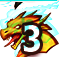
<style>
.page{position:relative;width:59px;height:57px;background:#ffffff}
.page>*{position:absolute;margin:0}
.t1{font:37.5px "ElanITCStd-Bold";font-variant:small-caps}
</style>
<div class="page">
<p class="t1" style="left:23px;top:15px;width:17px;height:27px">3</p>
</div>
